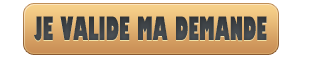
<style>
.page{position:relative;width:312px;height:58px;background:#ffffff}
.page>*{position:absolute;margin:0}
.t1{font:31.6px "GillSans-UltraBoldCondensed";color:#3e4246;scale:0.7 1}
</style>
<div class="page">
<p class="t1" style="left:34px;top:16px;width:233px;height:25px">JE VALIDE MA DEMANDE</p>
</div>
